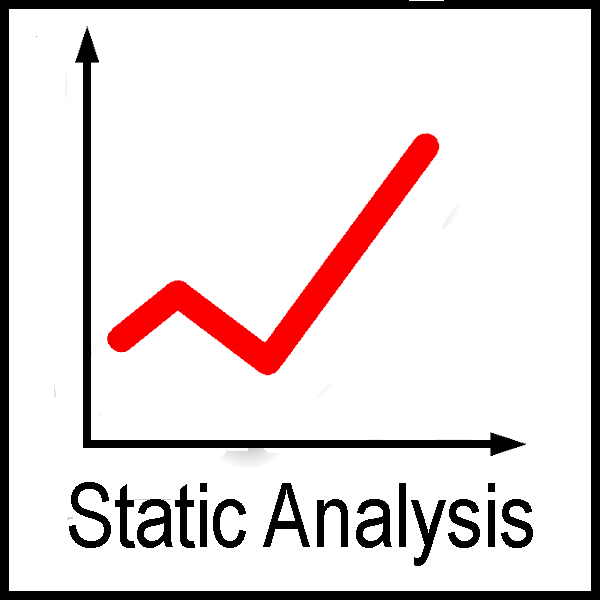
<style>
.page{position:relative;width:600px;height:600px;background:#ffffff}
.page>*{position:absolute;margin:0}
.t1{font:90.3px "ArialNarrow";letter-spacing:-0.005em;color:#000000}
</style>
<div class="page">
<p class="t1" style="left:69px;top:482px;width:464px;height:84px">Static Analysis</p>
</div>
